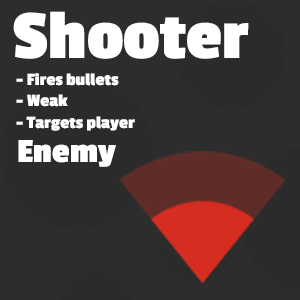
<style>
.page{position:relative;width:300px;height:300px;background:#2d2d2d}
.page>*{position:absolute;margin:0}
.t1{font:72px "PassionOne-Bold";color:#ffffff}
.t2{font:18px "PassionOne-Bold";color:#ffffff}
.t3{font:35.3px "PassionOne-Bold";color:#ffffff}
</style>
<div class="page">
<p class="t1" style="left:13px;top:11px;width:236px;height:48px">Shooter</p>
<p class="t2" style="left:16px;top:73px;width:119px;height:58px">- Fires bullets<br>- Weak<br>- Targets player</p>
<p class="t3" style="left:18px;top:140px;width:98px;height:27px">Enemy</p>
</div>
